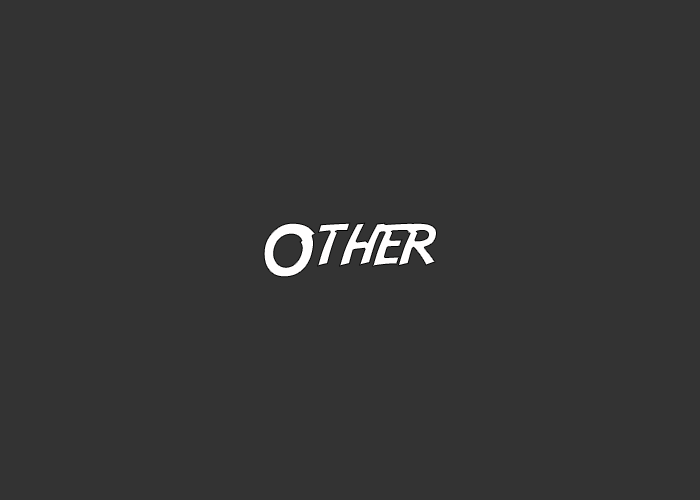
<style>
.page{position:relative;width:700px;height:500px;background:#333333}
.page>*{position:absolute;margin:0}
.t1{font:73px "Adventure";color:#fffefe}
</style>
<div class="page">
<p class="t1" style="left:263px;top:222px;width:174px;height:56px">Other</p>
</div>
